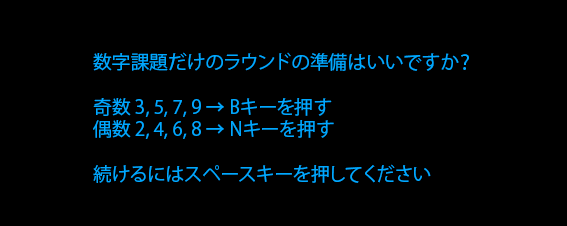
<style>
.page{position:relative;width:567px;height:226px;background:#000000}
.page>*{position:absolute;margin:0}
.t1{font:18.8px "KozGoPr6N-Regular";color:#00a8ff}
</style>
<div class="page">
<p class="t1" style="left:93px;top:52px;width:376px;height:131px">数字課題だけのラウンドの準備はいいですか？<br><br>奇数 3, 5, 7, 9 → Bキーを押す<br>偶数 2, 4, 6, 8 → Nキーを押す<br><br>続けるにはスペースキーを押してください</p>
</div>
